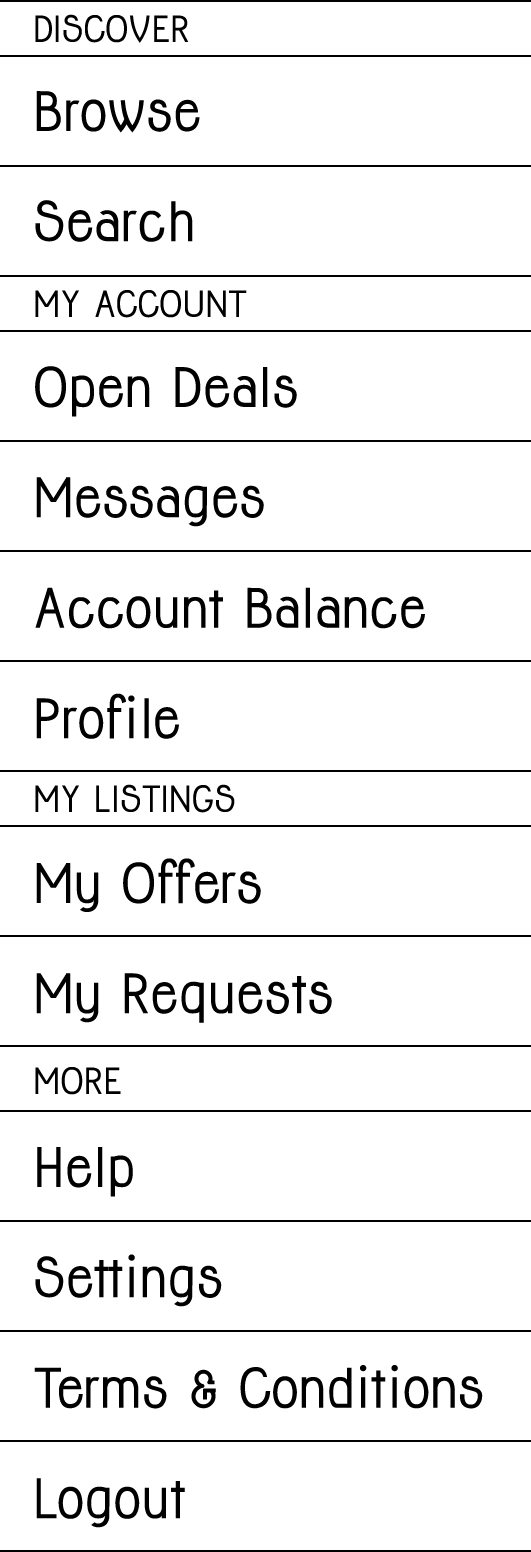
<style>
.page{position:relative;width:531px;height:1552px;background:#ffffff}
.page>*{position:absolute;margin:0}
.t1{font:33.3px "Jolly-Bold";color:#000000}
.t2{font:50px/110.4px "Jolly-Bold";color:#000000}
</style>
<div class="page">
<p class="t1" style="left:35px;top:14px;width:154px;height:29px">DISCOVER</p>
<p class="t2" style="left:35px;top:91px;width:165px;height:151px">Browse<br>Search</p>
<p class="t1" style="left:35px;top:290px;width:212px;height:28px">MY ACCOUNT</p>
<p class="t2" style="left:35px;top:366px;width:390px;height:373px">Open Deals<br>Messages<br>Account Balance<br>Profile</p>
<p class="t1" style="left:35px;top:784px;width:200px;height:29px">MY LISTINGS</p>
<p class="t2" style="left:36px;top:858px;width:296px;height:165px">My Offers<br>My Requests</p>
<p class="t1" style="left:35px;top:1067px;width:86px;height:28px">MORE</p>
<p class="t2" style="left:34px;top:1147px;width:449px;height:381px">Help<br>Settings<br>Terms &amp; Conditions<br>Logout</p>
</div>
